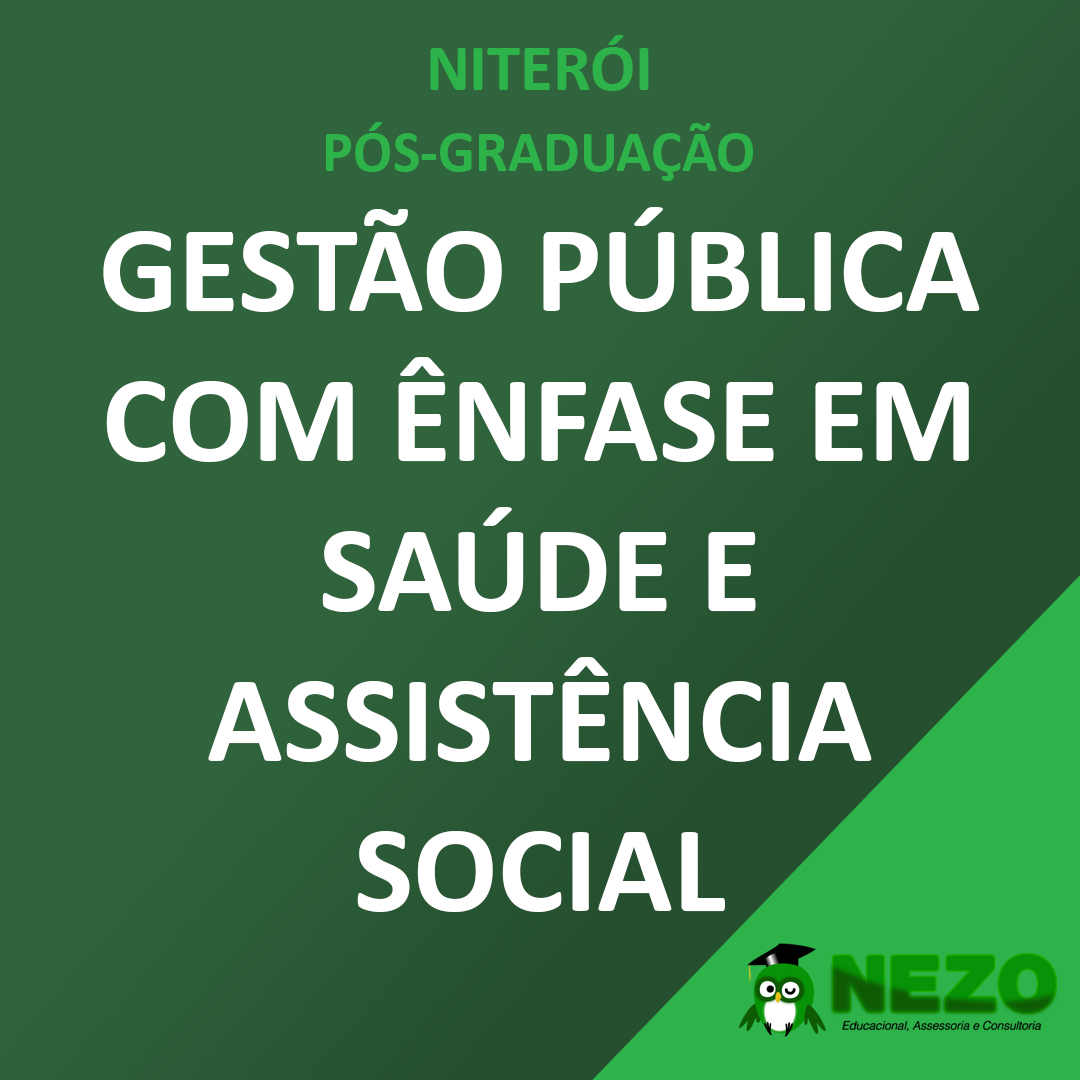
<style>
.page{position:relative;width:1080px;height:1080px;background:#2f643c}
.page>*{position:absolute;margin:0}
.t1{font:58.3px/81px "Calibri-Bold";color:#2db34a}
.t2{font:66.7px/81px "Calibri-Bold";color:#2db34a}
.t3{font:125px "Calibri-Bold";color:#ffffff}
</style>
<div class="page">
<p class="t1" style="left:326px;top:35px;width:427px;height:146px;text-align:center"><span class="t2">NITERÓI<br></span>PÓS-GRADUAÇÃO</p>
<p class="t3" style="left:103px;top:207px;width:877px;height:705px;text-align:center">GESTÃO PÚBLICA COM ÊNFASE EM SAÚDE E ASSISTÊNCIA SOCIAL</p>
</div>
